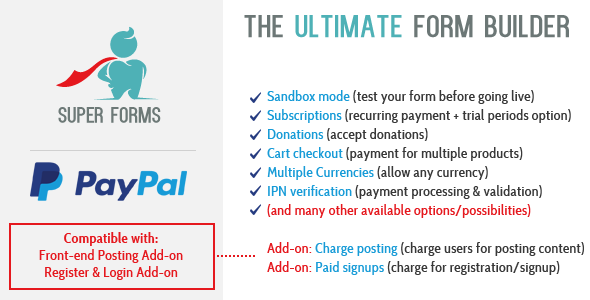
<style>
.page{position:relative;width:590px;height:300px;background:#ffffff}
.page>*{position:absolute;margin:0}
.t1{font:31.7px "Kenzo";letter-spacing:0.025em;color:#6c7776}
.t2{font:31.7px "Kenzo";letter-spacing:0.025em;color:#4eb1b6}
.t3{font:14px/19px "CabinCondensed";letter-spacing:0.025em;color:#e5181e}
.t4{font:14px/19px "CabinCondensed";letter-spacing:0.025em;color:#179bd7}
.t5{font:14px/19px "CabinCondensed";letter-spacing:0.025em;color:#383838}
.t6{font:14px/17px "CabinCondensed";letter-spacing:0.025em;color:#e5181e}
.t7{font:14px/17px "CabinCondensed-Bold";letter-spacing:0.025em;color:#e5181e}
</style>
<div class="page">
<p class="t1" style="left:244px;top:15px;width:325px;height:23px">The <span class="t2">ultimate</span> form builder</p>
<p class="t3" style="left:267px;top:90px;width:317px;height:185px"><span class="t4">Sandbox mode </span><span class="t5">(test your form before going live)<br></span><span class="t4">Subscriptions </span><span class="t5">(recurring payment + trial periods option)<br></span><span class="t4">Donations </span><span class="t5">(accept donations)<br></span><span class="t4">Cart checkout </span><span class="t5">(payment for multiple products)<br></span><span class="t4">Multiple Currencies </span><span class="t5">(allow any currency)<br></span><span class="t4">IPN verification </span><span class="t5">(payment processing &amp; validation)<br></span>(and many other available options/possibilities)<br><br>Add-on: <span class="t4">Charge posting </span><span class="t5">(charge users for posting content)<br></span>Add-on: <span class="t4">Paid signups </span><span class="t5">(charge for registration/signup)</span></p>
<p class="t6" style="left:39px;top:232px;width:144px;height:48px;text-align:center"><span class="t7">Compatible with:<br></span>Front-end Posting Add-on<br>Register &amp; Login Add-on</p>
</div>
